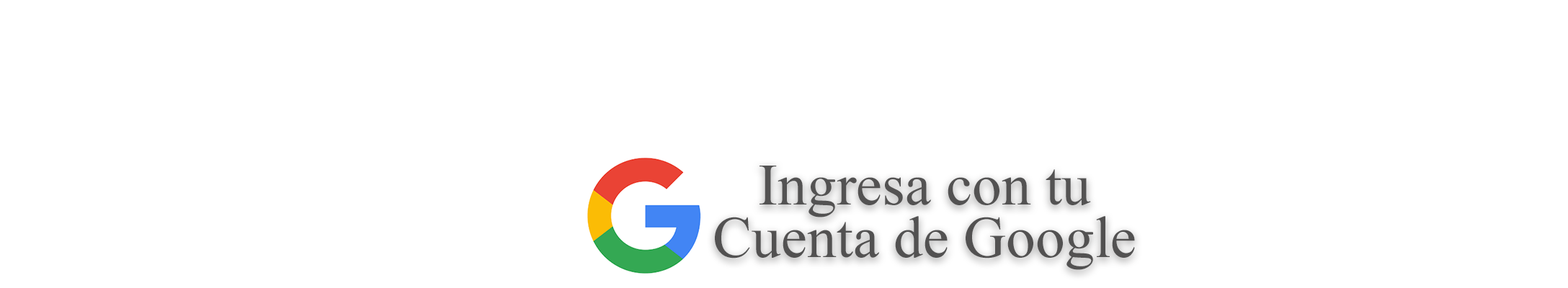
<style>
.page{position:relative;width:1568px;height:288px;background:#ffffff}
.page>*{position:absolute;margin:0}
.t1{font:58.7px "TimesNewRomanPSMT";color:#535252}
.t2{font:58.7px "TimesNewRomanPSMT";color:#525151}
</style>
<div class="page">
<p class="t1" style="left:760px;top:166px;width:331px;height:52px">Ingresa con tu</p>
<p class="t2" style="left:715px;top:216px;width:420px;height:54px">Cuenta de Google</p>
</div>
